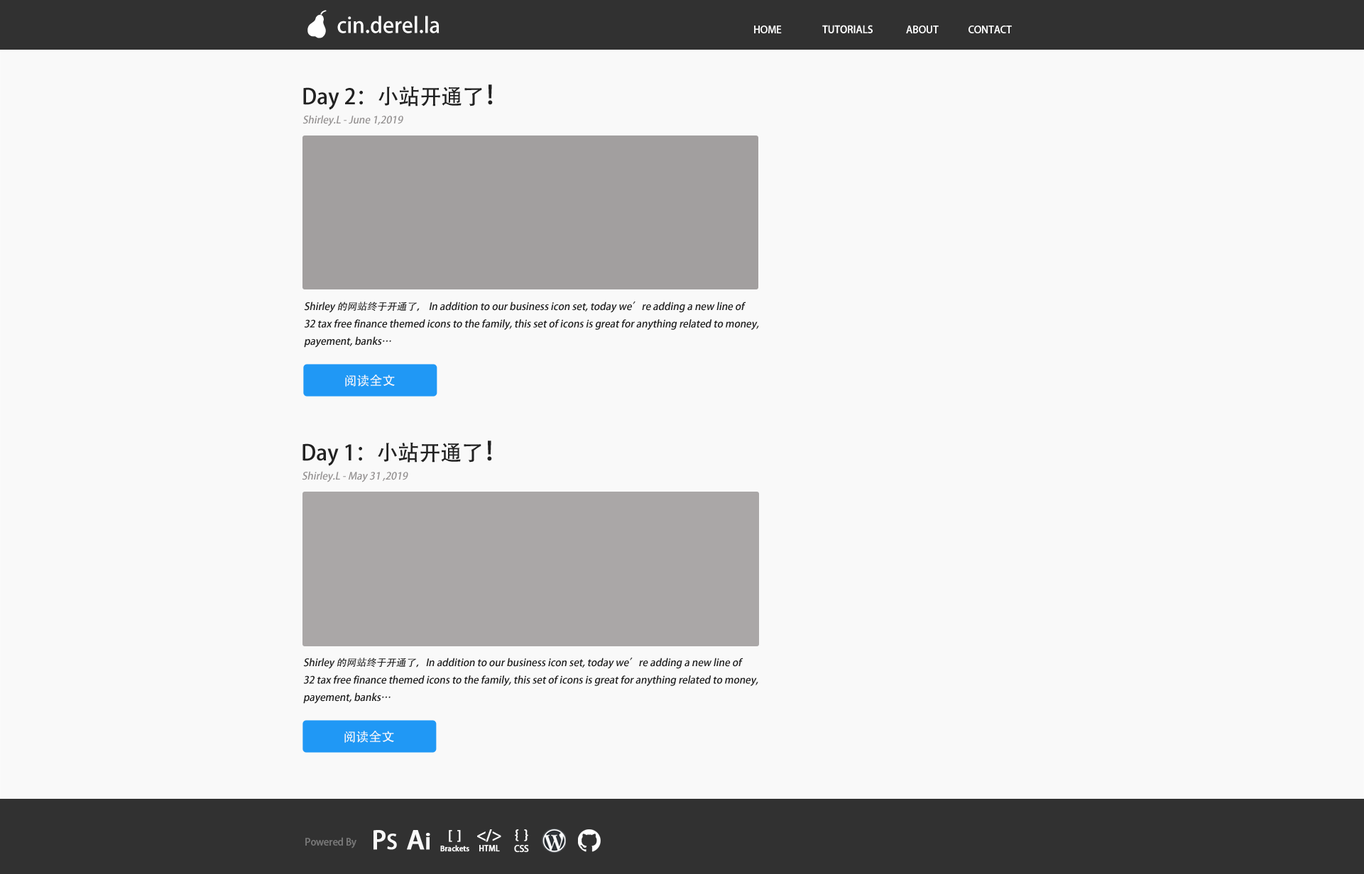
<style>
.page{position:relative;width:1364px;height:874px;background:#f9f9f9}
.page>*{position:absolute;margin:0}
.t1{font:21.3px "AdobeHeitiStd-Regular";color:#ffffff}
.t2{font:9.9px "AdobeHeitiStd-Regular";color:#ffffff}
.t3{font:21.3px "AdobeHeitiStd-Regular";color:#222222}
.t4{font:25.6px "AdobeHeitiStd-Regular";color:#222222}
.t5{font:9.9px "AdobeHeitiStd-Regular";color:#959292;font-style:italic}
.t6{font:9.9px "AdobeHeitiStd-Regular";color:#222222;font-style:italic}
.t7{font:12.8px "AdobeHeitiStd-Regular";color:#faf7fa}
.t8{font:25px "AdobeHeitiStd-Regular";letter-spacing:-0.04em;color:#f9f9f9;font-weight:bold}
.t9{font:19.9px "AdobeHeitiStd-Regular";letter-spacing:-0.04em;color:#f9f9f9;font-weight:bold}
.t10{font:24.8px "AdobeHeitiStd-Regular";letter-spacing:-0.02em;color:#f9f9f9;font-weight:bold;scale:1.1 1}
.t11{font:21.3px "AdobeHeitiStd-Regular";letter-spacing:-0.02em;color:#f9f9f9;font-weight:bold;scale:1.1 1}
.t12{font:7.4px/10.8px "AdobeHeitiStd-Regular";letter-spacing:-0.02em;color:#f9f9f9;font-weight:bold}
.t13{font:12.8px/15.7px "AdobeHeitiStd-Regular";letter-spacing:-0.04em;color:#f9f9f9;font-weight:bold}
.t14{font:7.8px/12.6px "AdobeHeitiStd-Regular";letter-spacing:-0.02em;color:#f9f9f9;font-weight:bold}
.t15{font:14.9px/17.2px "AdobeHeitiStd-Regular";letter-spacing:-0.04em;color:#f9f9f9;font-weight:bold}
.t16{font:12.8px/16.3px "AdobeHeitiStd-Regular";letter-spacing:-0.04em;color:#f9f9f9;font-weight:bold}
.t17{font:8.5px/14px "AdobeHeitiStd-Regular";letter-spacing:-0.02em;color:#f9f9f9;font-weight:bold}
.t18{font:9.9px "AdobeHeitiStd-Regular";letter-spacing:-0.02em;color:#777777}
</style>
<div class="page">
<p class="t1" style="left:337px;top:16px;width:102px;height:17px">cin.derel.la</p>
<p class="t2" style="left:754px;top:26px;width:28px;height:7px">HOME</p>
<p class="t2" style="left:822px;top:25px;width:50px;height:8px">TUTORIALS</p>
<p class="t2" style="left:906px;top:26px;width:32px;height:7px">ABOUT</p>
<p class="t2" style="left:968px;top:26px;width:43px;height:7px">CONTACT</p>
<p class="t3" style="left:303px;top:84px;width:190px;height:26px">Day 2：小站开通了<span class="t4">！</span></p>
<p class="t5" style="left:302px;top:115px;width:101px;height:11px">Shirley.L - June 1,2019</p>
<p class="t6" style="left:304px;top:302px;width:455px;height:46px">Shirley 的网站终于开通了， In addition to our business icon set, today we’re adding a new line of <br>32 tax free finance themed icons to the family, this set of icons is great for anything related to money, <br>payement, banks…</p>
<p class="t7" style="left:345px;top:375px;width:50px;height:12px">阅读全文</p>
<p class="t3" style="left:302px;top:441px;width:190px;height:25px">Day 1：小站开通了<span class="t4">！</span></p>
<p class="t5" style="left:302px;top:471px;width:106px;height:12px">Shirley.L - May 31 ,2019</p>
<p class="t6" style="left:303px;top:658px;width:455px;height:46px">Shirley 的网站终于开通了，In addition to our business icon set, today we’re adding a new line of <br>32 tax free finance themed icons to the family, this set of icons is great for anything related to money, <br>payement, banks…</p>
<p class="t7" style="left:344px;top:731px;width:50px;height:12px">阅读全文</p>
<p class="t8" style="left:373px;top:830px;width:24px;height:20px">P<span class="t9">S</span></p>
<p class="t10" style="left:407px;top:830px;width:23px;height:20px">A<span class="t11">i</span></p>
<p class="t12" style="left:440px;top:830px;width:29px;height:22px;text-align:center"><span class="t13">[  ]<br></span>Brackets</p>
<p class="t14" style="left:477px;top:830px;width:24px;height:22px;text-align:center"><span class="t15">&lt;/&gt;<br></span>HTML</p>
<p class="t16" style="left:514px;top:830px;width:15px;height:23px;text-align:center">{  }<br><span class="t17">CSS</span></p>
<p class="t18" style="left:305px;top:838px;width:51px;height:11px">Powered By</p>
</div>
